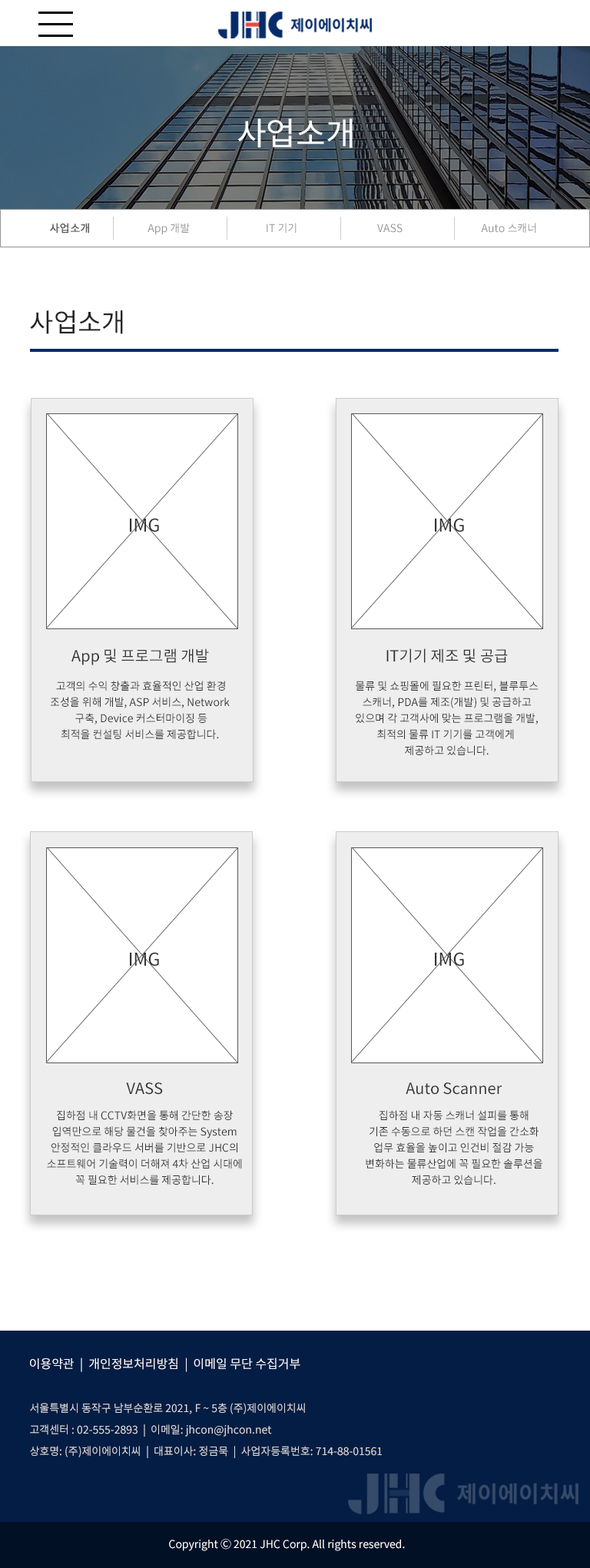
<style>
.page{position:relative;width:590px;height:1568px;background:#ffffff}
.page>*{position:absolute;margin:0}
.t1{font:32.3px "NotoSansKR-Regular";color:#ffffff}
.t2{font:10.8px "NotoSansKR-Regular";color:#595959;font-weight:bold}
.t3{font:10.8px "NotoSansKR-Regular";color:#959595}
.t4{font:26.1px "NotoSansKR-Regular";color:#242424}
.t5{font:17.8px "NotoSansKR-Regular";color:#333333}
.t6{font:15.4px "NotoSansKR-Regular";color:#333333}
.t7{font:10.8px/16.1px "NotoSansKR-Regular";color:#333333}
.t8{font:12.3px "NotoSansKR-Regular";color:#ffffff}
.t9{font:10.8px/21.5px "NotoSansKR-Regular";color:#dddddd}
.t10{font:10.8px "NotoSansKR-Regular";color:#ffffff}
</style>
<div class="page">
<p class="t1" style="left:237px;top:118px;width:116px;height:30px">사업소개</p>
<p class="t2" style="left:50px;top:223px;width:39px;height:11px">사업소개</p>
<p class="t3" style="left:148px;top:223px;width:42px;height:12px">App 개발</p>
<p class="t3" style="left:267px;top:223px;width:30px;height:10px">IT 기기</p>
<p class="t3" style="left:377px;top:224px;width:26px;height:9px">VASS</p>
<p class="t3" style="left:481px;top:223px;width:55px;height:10px">Auto 스캐너</p>
<p class="t4" style="left:30px;top:310px;width:93px;height:24px">사업소개</p>
<p class="t5" style="left:130px;top:518px;width:29px;height:14px">IMG</p>
<p class="t5" style="left:435px;top:518px;width:29px;height:14px">IMG</p>
<p class="t6" style="left:71px;top:648px;width:138px;height:17px">App 및 프로그램 개발</p>
<p class="t6" style="left:386px;top:648px;width:122px;height:15px">IT기기 제조 및 공급</p>
<p class="t7" style="left:51px;top:681px;width:179px;height:59px;text-align:center">고객의 수익 창출과 효율적인 산업 환경<br>조성을 위해 개발, ASP 서비스, Network <br>구축, Device 커스터마이징 등<br>최적을 컨설팅 서비스를 제공합니다.</p>
<p class="t7" style="left:356px;top:681px;width:183px;height:75px;text-align:center">물류 및 쇼핑몰에 필요한 프린터, 블루투스<br>스캐너, PDA를 제조(개발) 및 공급하고<br>있으며 각 고객사에 맞는 프로그램을 개발,<br>최적의 물류 IT 기기를 고객에게 <br>제공하고 있습니다.</p>
<p class="t5" style="left:130px;top:952px;width:29px;height:14px">IMG</p>
<p class="t5" style="left:435px;top:952px;width:29px;height:14px">IMG</p>
<p class="t6" style="left:126px;top:1082px;width:37px;height:13px">VASS</p>
<p class="t6" style="left:406px;top:1082px;width:96px;height:13px">Auto Scanner</p>
<p class="t7" style="left:47px;top:1110px;width:195px;height:75px;text-align:center">집하점 내 CCTV화면을 통해 간단한 송장<br>입역만으로 해당 물건을 찾아주는 System<br>안정적인 클라우드 서버를 기반으로 JHC의<br>소프트웨어 기술력이 더해져 4차 산업 시대에<br>꼭 필요한 서비스를 제공합니다.</p>
<p class="t7" style="left:366px;top:1110px;width:176px;height:75px;text-align:center">집하점 내 자동 스캐너 설피를 통해<br>기존 수동으로 하던 스캔 작업을 간소화<br>업무 효율을 높이고 인건비 절감 가능<br>변화하는 물류산업에 꼭 필요한 솔루션을<br>제공하고 있습니다.</p>
<p class="t8" style="left:30px;top:1357px;width:270px;height:15px">이용약관  |  개인정보처리방침  |  이메일 무단 수집거부</p>
<p class="t9" style="left:30px;top:1403px;width:352px;height:55px">서울특별시 동작구 남부순환로 2021, F ~ 5층 (주)제이에이치씨<br>고객센터 : 02-555-2893  |  이메일: jhcon@jhcon.net<br>상호명: (주)제이에이치씨  |  대표이사: 정금묵  |  사업자등록번호: 714-88-01561</p>
<p class="t10" style="left:169px;top:1539px;width:236px;height:12px">Copyright Ⓒ 2021 JHC Corp. All rights reserved.</p>
</div>
